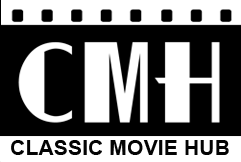
<style>
.page{position:relative;width:241px;height:162px;background:#000000}
.page>*{position:absolute;margin:0}
.t1{font:20.3px "Arial-BoldMT";color:#030303;scale:1.05 1}
</style>
<div class="page">
<p class="t1" style="left:11px;top:140px;width:218px;height:15px">CLASSIC MOVIE HUB</p>
</div>
